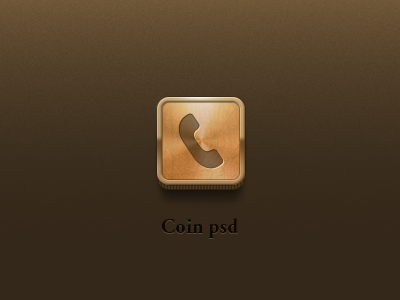
<style>
.page{position:relative;width:400px;height:300px;background:#34281a}
.page>*{position:absolute;margin:0}
.t1{font:21.2px "AGaramondPro-Bold";color:#0e0902}
</style>
<div class="page">
<p class="t1" style="left:161px;top:218px;width:78px;height:20px">Coin psd</p>
</div>
